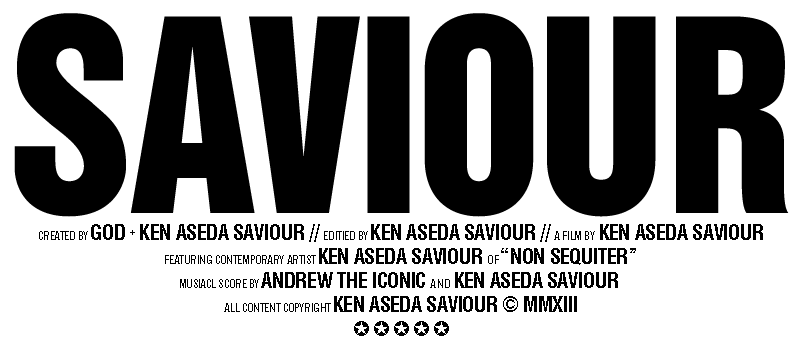
<style>
.page{position:relative;width:800px;height:346px;background:#ffffff}
.page>*{position:absolute;margin:0}
.t1{font:11.5px/8px "HelveticaLTStd-BoldCond";letter-spacing:-0.02em;color:#000000;scale:0.93 1}
.t2{font:21.3px/8px "HelveticaLTStd-BoldCond";letter-spacing:-0.02em;color:#000000;scale:0.93 1}
.t3{font:11.5px/8px "HelveticaLTStd-BoldCond";letter-spacing:0.06em;color:#000000;scale:0.93 1}
.t4{font:21.3px/8px "ArialUnicodeMS";letter-spacing:0.2em;color:#000000;scale:0.93 1}
</style>
<div class="page">
<p class="t1" style="left:39px;top:224px;width:724px;height:112px;text-align:center">CREATED BY <span class="t2">GOD </span>+<span class="t2"> KEN ASEDA SAVIOUR // </span>EDITIED BY <span class="t2">KEN ASEDA SAVIOUR // </span>A FILM BY  <span class="t2">KEN ASEDA SAVIOUR<br><br><br></span>FEATURING CONTEMPORARY ARTIST <span class="t2">KEN ASEDA SAVIOUR </span>OF <span class="t2">“NON SEQUITER”<br></span><br><br>MUSIACL SCORE BY <span class="t2">ANDREW THE ICONIC </span><span class="t3">AND </span><span class="t2">KEN ASEDA SAVIOUR <br><br><br></span>ALL CONTENT COPYRIGHT <span class="t2">KEN ASEDA SAVIOUR © MMXIII<br><br><br></span><span class="t4">✪✪✪✪✪</span></p>
</div>
